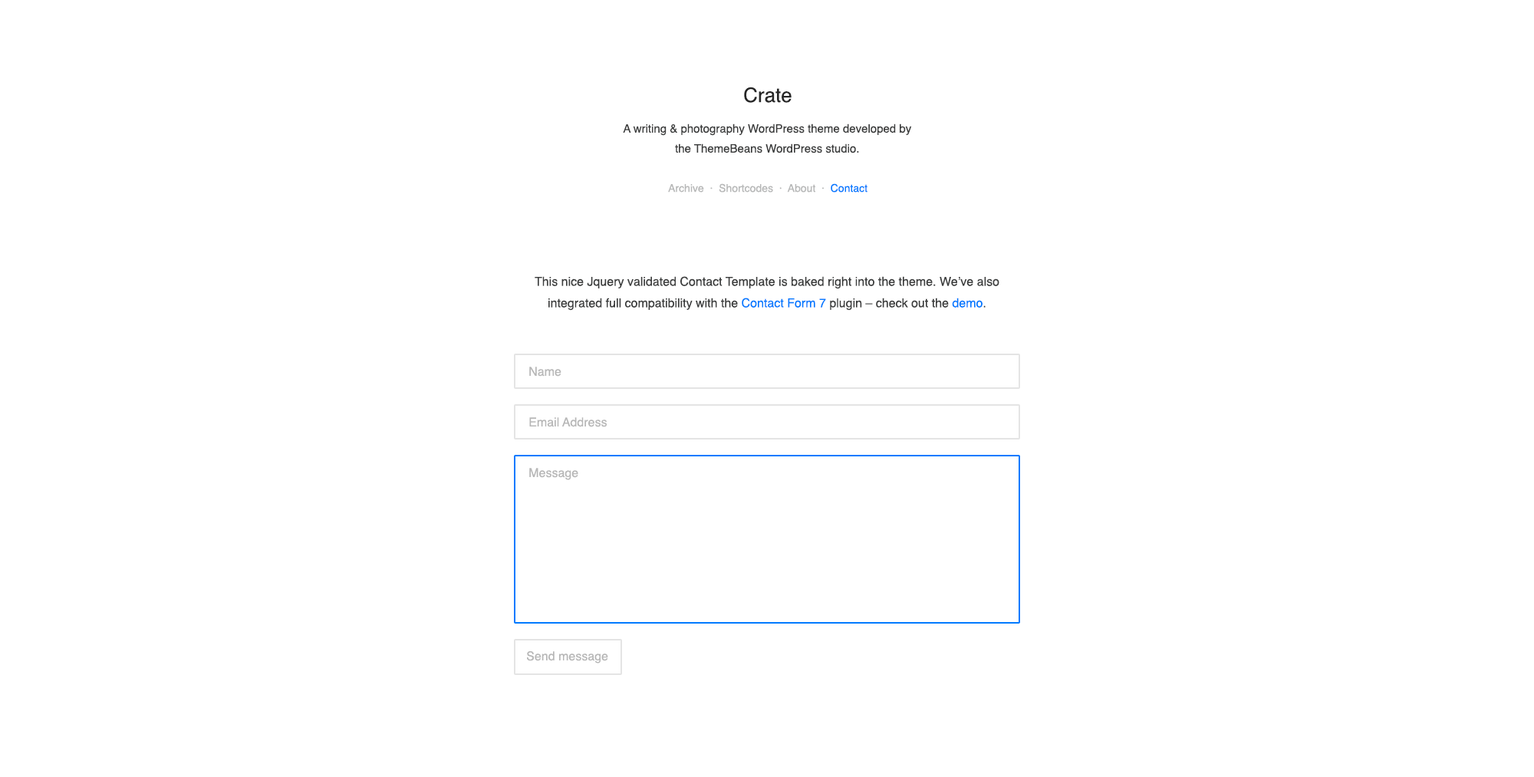
<style>
.page{position:relative;width:1534px;height:777px;background:#ffffff}
.page>*{position:absolute;margin:0}
.t1{font:19.9px "Helvetica";color:#262626}
.t2{font:11.5px/19.9px "Helvetica";color:#3c3d3d}
.t3{font:10.7px "Helvetica";color:#b7b8b8}
.t4{font:10.7px "Helvetica";color:#007aff}
.t5{font:12.3px/21.5px "Helvetica";color:#3c3d3d}
.t6{font:12.3px/21.5px "Helvetica";color:#007aff}
.t7{font:12.3px "Helvetica";color:#b7b7b7}
</style>
<div class="page">
<p class="t1" style="left:744px;top:87px;width:48px;height:16px">Crate</p>
<p class="t2" style="left:623px;top:124px;width:289px;height:29px;text-align:center">A writing &amp; photography WordPress theme developed by <br>the ThemeBeans WordPress studio.</p>
<p class="t3" style="left:668px;top:183px;width:200px;height:10px">Archive  ·  Shortcodes  ·  About  ·  <span class="t4">Contact</span></p>
<p class="t5" style="left:535px;top:276px;width:465px;height:35px;text-align:center">This nice Jquery validated Contact Template is baked right into the theme. We’ve also <br>integrated full compatibility with the <span class="t6">Contact Form 7</span> plugin – check out the <span class="t6">demo</span>.</p>
<p class="t7" style="left:529px;top:367px;width:33px;height:10px">Name</p>
<p class="t7" style="left:529px;top:417px;width:79px;height:10px">Email Address</p>
<p class="t7" style="left:529px;top:468px;width:49px;height:12px">Message</p>
<p class="t7" style="left:527px;top:651px;width:81px;height:13px">Send message</p>
</div>
